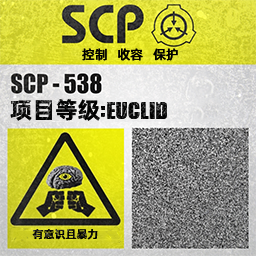
<style>
.page{position:relative;width:256px;height:256px}
.page>*{position:absolute;margin:0}
.t1{font:13px "AlibabaPuHuiTiM";color:#000000}
.t2{font:26px "URWImpactW01-Bold";letter-spacing:0.02em;color:#000000}
.t3{font:23px "AlibabaPuHuiTiB";color:#000000}
.t4{font:31px "URWImpactW01-Bold";letter-spacing:0.02em;color:#000000}
.t5{font:11px "AlibabaPuHuiTiM";letter-spacing:0.02em;color:#000000}
</style>
<div class="page">
<p class="t1" style="left:82px;top:48px;width:96px;height:13px">控制   收容   保护</p>
<p class="t2" style="left:10px;top:99px;width:157px;height:22px"><span class="t3">项目等级</span><span class="t4">:</span>EUCLID</p>
<p class="t5" style="left:32px;top:229px;width:66px;height:11px">有意识且暴力</p>
</div>
